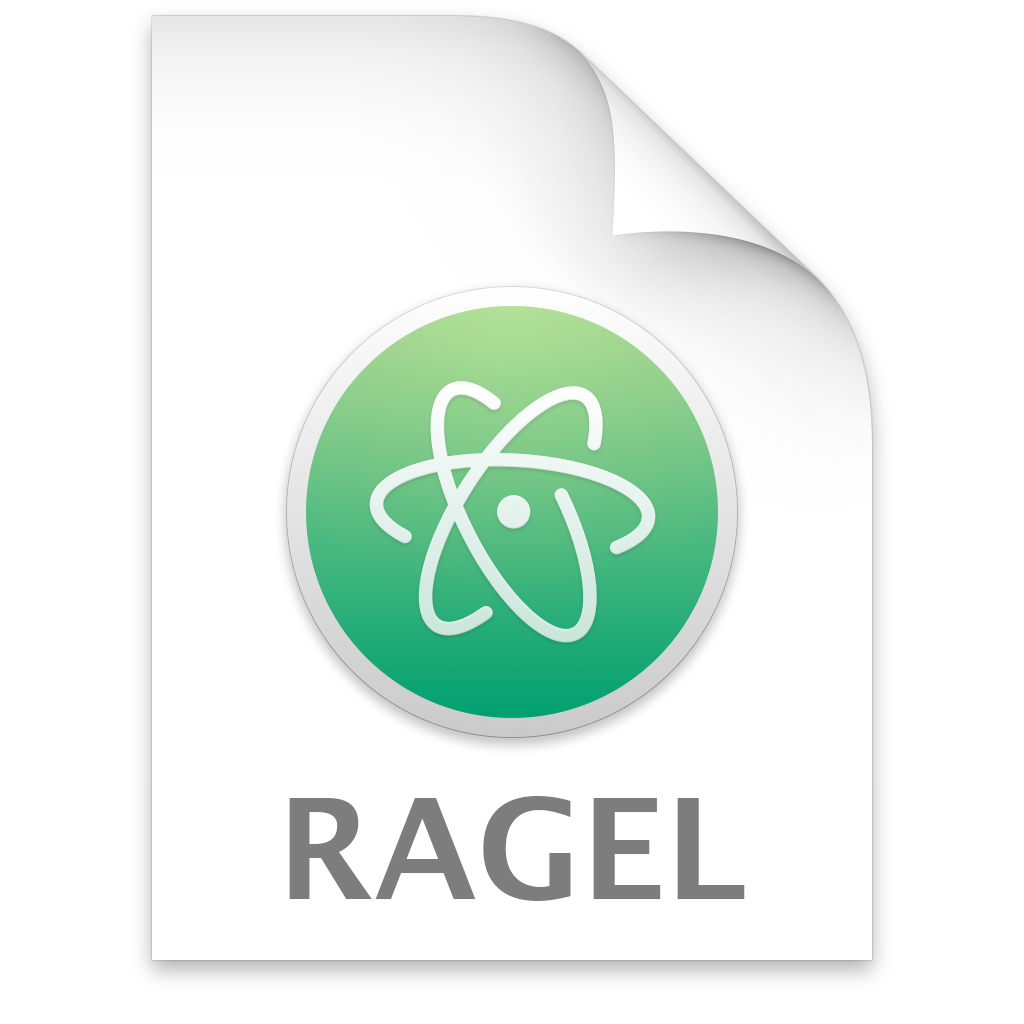
<style>
.page{position:relative;width:1024px;height:1024px;background:#ffffff}
.page>*{position:absolute;margin:0}
.t1{font:140px "LucidaGrande-Bold";color:#7d7d7d}
</style>
<div class="page">
<p class="t1" style="left:289px;top:796px;width:456px;height:105px">RAGEL</p>
</div>
